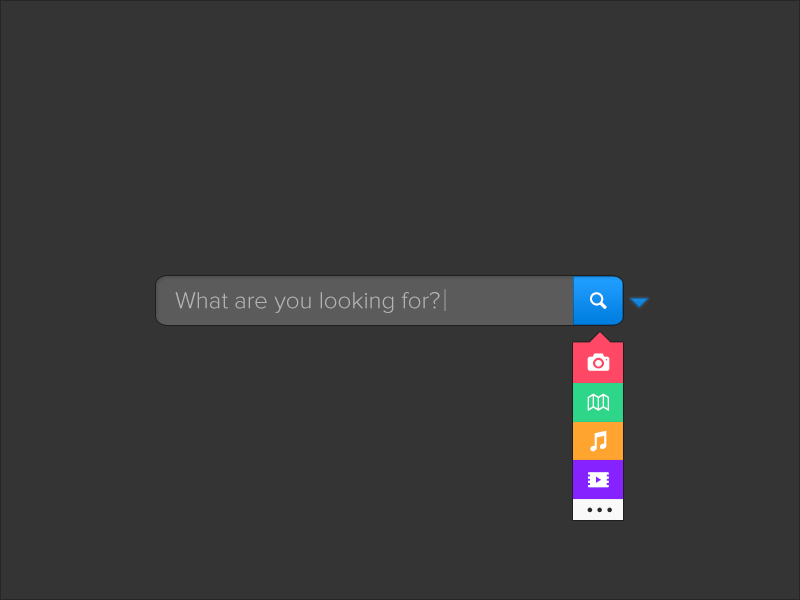
<style>
.page{position:relative;width:800px;height:600px;background:#343434}
.page>*{position:absolute;margin:0}
.t1{font:23.8px "ProximaNova-Light";color:#b3b3b3}
.t2{font:42.7px "ProximaNova-Regular";color:#2a2a2a;text-transform:uppercase}
</style>
<div class="page">
<p class="t1" style="left:175px;top:292px;width:265px;height:21px">What are you looking for?</p>
<p class="t2" style="left:587px;top:507px;width:25px;height:6px">...</p>
</div>
